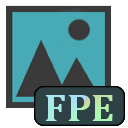
<style>
.page{position:relative;width:128px;height:128px;background:#48aab5}
.page>*{position:absolute;margin:0}
.t1{font:39.3px "Cambria-Bold"}
</style>
<div class="page">
<p class="t1" style="left:45px;top:95px;width:68px;height:26px">FPE</p>
</div>
